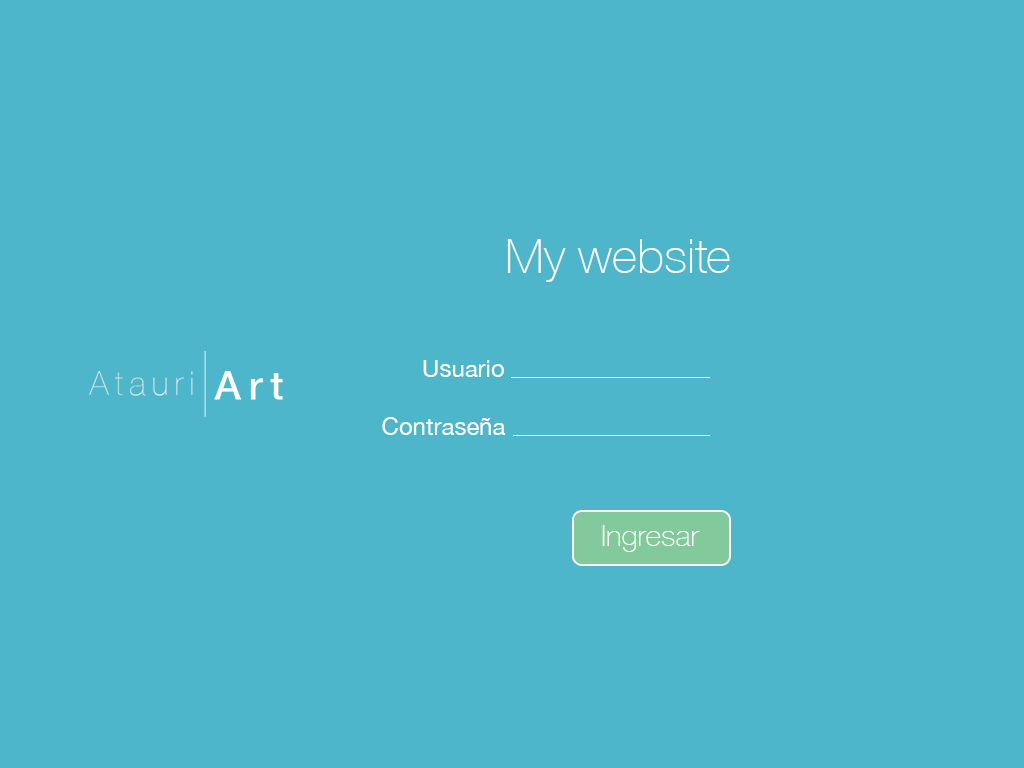
<style>
.page{position:relative;width:1024px;height:768px;background:#4db6cb}
.page>*{position:absolute;margin:0}
.t1{font:48px "HelveticaNeue-Thin";color:#fbfbfb}
.t2{font:24px "HelveticaNeue";color:#fbfbfb}
.t3{font:30px "HelveticaNeue-Thin";color:#fbfbfb}
</style>
<div class="page">
<p class="t1" style="left:507px;top:239px;width:223px;height:43px">My website</p>
<p class="t2" style="left:423px;top:360px;width:81px;height:17px">Usuario</p>
<p class="t2" style="left:382px;top:417px;width:124px;height:18px">Contraseña</p>
<p class="t3" style="left:602px;top:525px;width:98px;height:27px">Ingresar</p>
</div>
